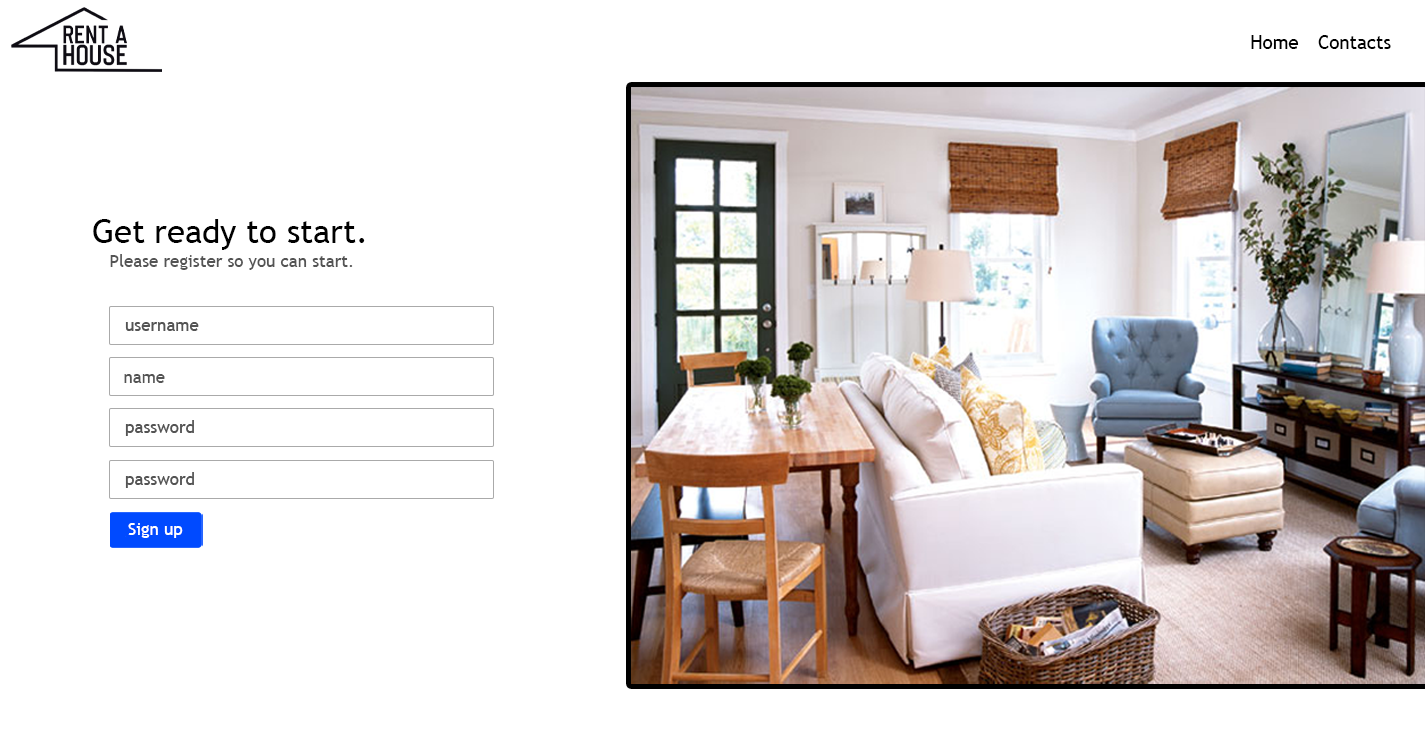
<style>
.page{position:relative;width:1425px;height:738px;background:#ffffff}
.page>*{position:absolute;margin:0}
.t1{font:18.7px "TrebuchetMS";color:#000000}
.t2{font:32.7px "TrebuchetMS";color:#000000}
.t3{font:17px "TrebuchetMS";color:#545454}
.t4{font:17px "TrebuchetMS";color:#ffffff}
</style>
<div class="page">
<p class="t1" style="left:1251px;top:35px;width:48px;height:14px">Home</p>
<p class="t1" style="left:1318px;top:35px;width:73px;height:14px">Contacts</p>
<p class="t2" style="left:93px;top:219px;width:272px;height:31px">Get ready to start.</p>
<p class="t3" style="left:110px;top:254px;width:243px;height:16px">Please register so you can start.</p>
<p class="t3" style="left:124px;top:374px;width:41px;height:9px">name</p>
<p class="t4" style="left:128px;top:523px;width:55px;height:15px">Sign up</p>
</div>
